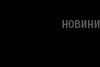
<style>
.page{position:relative;width:100px;height:67px;background:#000000}
.page>*{position:absolute;margin:0}
.t1{font:16px "MyriadPro-Cond";color:#5b5b5b}
</style>
<div class="page">
<p class="t1" style="left:62px;top:20px;width:38px;height:8px">новини</p>
</div>
